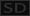
<style>
.page{position:relative;width:30px;height:16px;background:#0d0c0c}
.page>*{position:absolute;margin:0}
.t1{font:15px "Calibri";color:#2f2f2f;scale:1.47 1}
</style>
<div class="page">
<p class="t1" style="left:3px;top:2px;width:23px;height:11px">SD</p>
</div>
